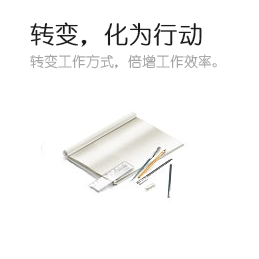
<style>
.page{position:relative;width:259px;height:259px;background:#ffffff}
.page>*{position:absolute;margin:0}
.t1{font:24px "YouYuan";color:#1d1d1d;font-weight:bold}
.t2{font:14px "YouYuan";color:#9d9d9d}
</style>
<div class="page">
<p class="t1" style="left:30px;top:22px;width:172px;height:25px">转变，化为行动</p>
<p class="t2" style="left:30px;top:54px;width:187px;height:15px">转变工作方式，倍增工作效率。</p>
</div>
